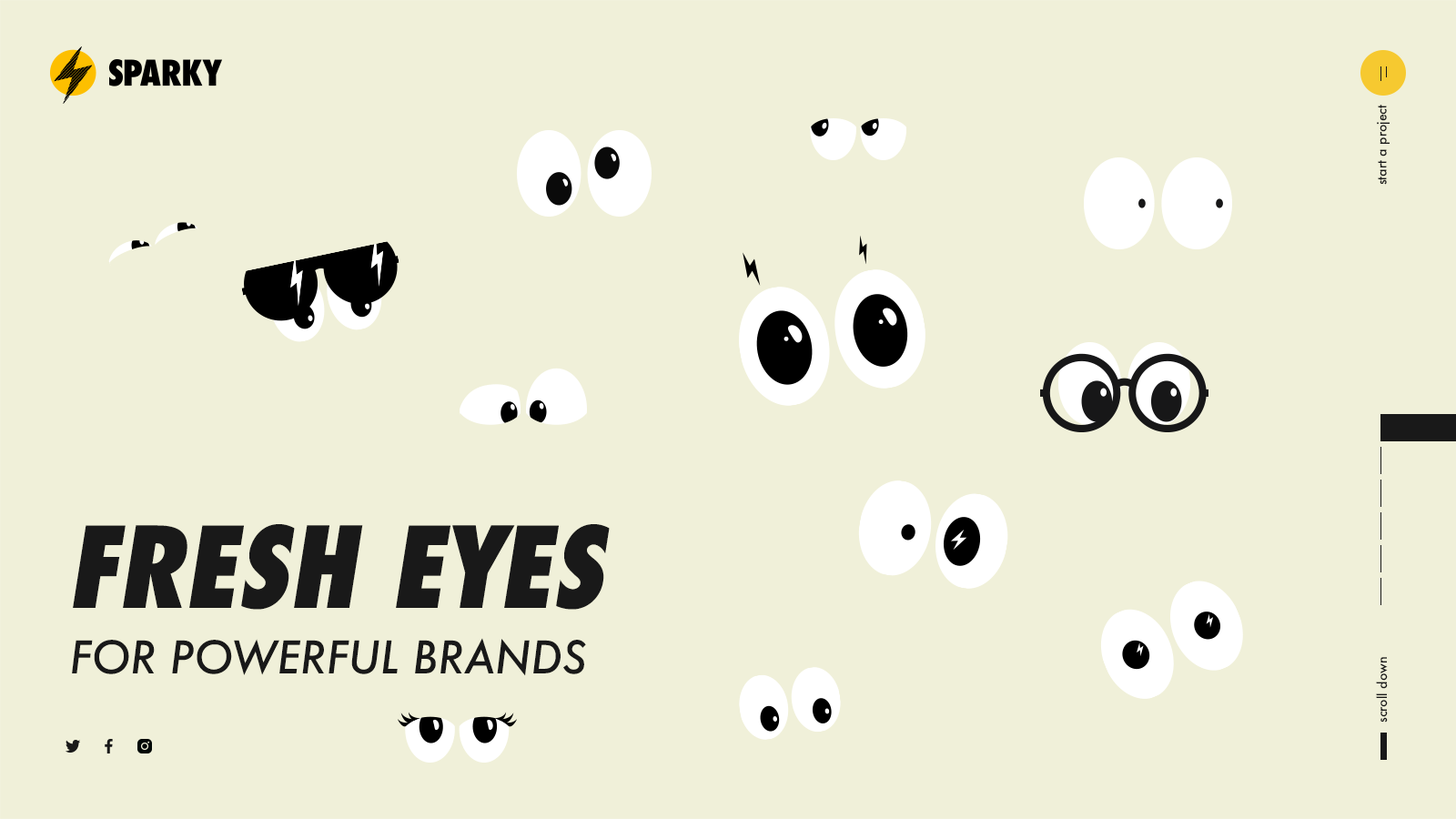
<style>
.page{position:relative;width:1456px;height:819px;background:#f0f0d9}
.page>*{position:absolute;margin:0}
.t1{font:12.7px "Futura-Medium";color:#191919}
.t2{font:109.2px "Futura-CondExtraBoldObl";color:#191919;text-transform:uppercase}
.t3{font:43.7px "Futura-MediumItalic";color:#191919}
</style>
<div class="page">
<p class="t1" style="left:1377px;top:105px;width:13px;height:80px;rotate:-90deg">start a project</p>
<p class="t2" style="left:73px;top:524px;width:537px;height:86px">fresh eyes</p>
<p class="t3" style="left:72px;top:638px;width:514px;height:38px">FOR POWERFUL BRANDS</p>
<p class="t1" style="left:1376px;top:657px;width:12px;height:66px;rotate:-90deg">scroll down</p>
</div>
